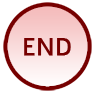
<style>
.page{position:relative;width:96px;height:96px;background:#ffffff}
.page>*{position:absolute;margin:0}
.t1{font:24.4px "Alef-Regular";color:#760000;font-weight:bold}
</style>
<div class="page">
<p class="t1" style="left:24px;top:38px;width:47px;height:18px">END</p>
</div>
